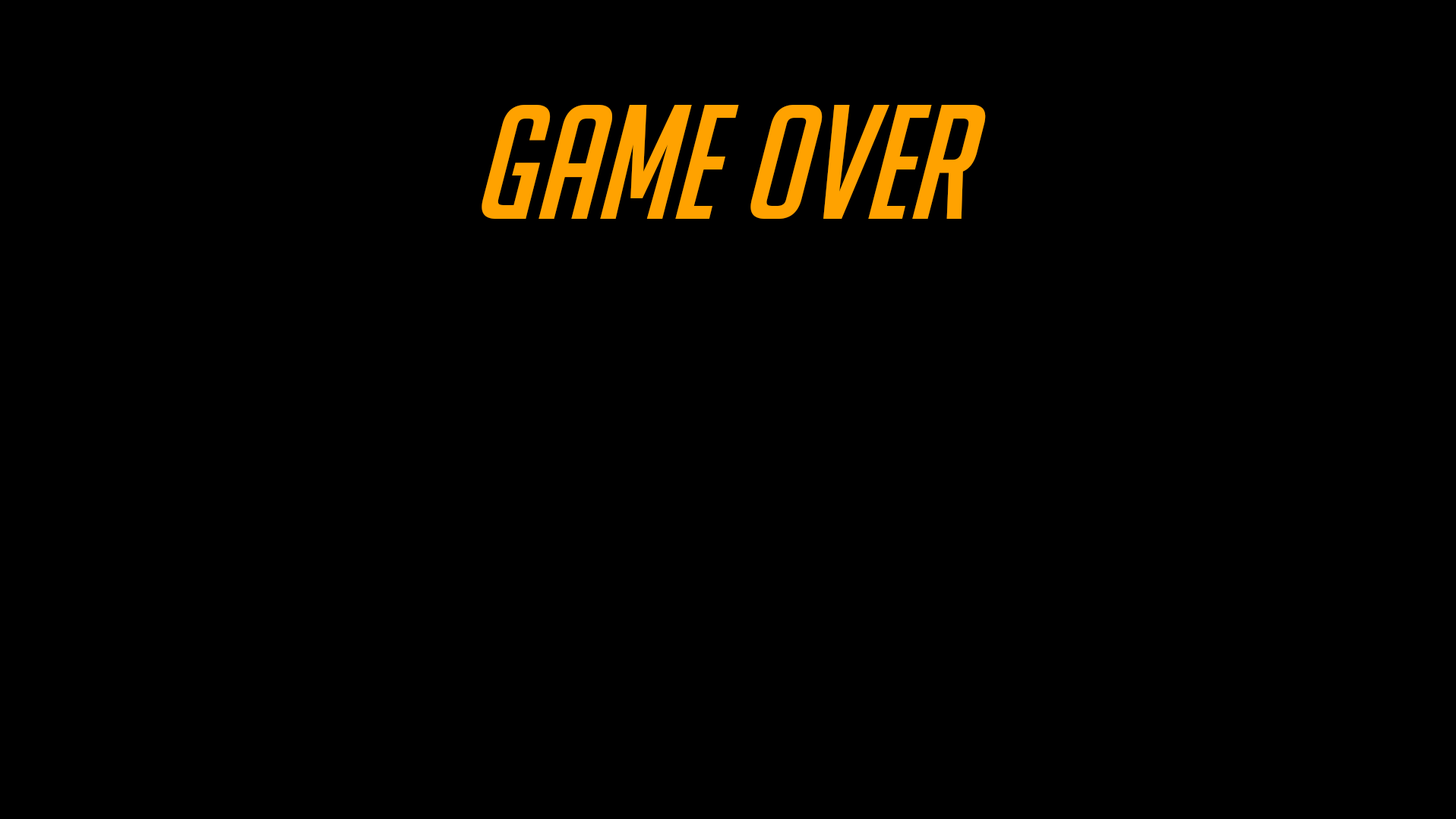
<style>
.page{position:relative;width:1456px;height:819px;background:#000000}
.page>*{position:absolute;margin:0}
.t1{font:158.8px "BigNoodleTooOblique";color:#ffa200}
</style>
<div class="page">
<p class="t1" style="left:482px;top:105px;width:504px;height:114px">Game Over</p>
</div>
